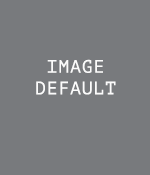
<style>
.page{position:relative;width:150px;height:175px;background:#787a7d}
.page>*{position:absolute;margin:0}
.t1{font:18px "PTMono-Regular";letter-spacing:0.05em;color:#fcfcfc}
</style>
<div class="page">
<p class="t1" style="left:36px;top:59px;width:80px;height:36px;text-align:center">IMAGE<br>DEFAULT</p>
</div>
